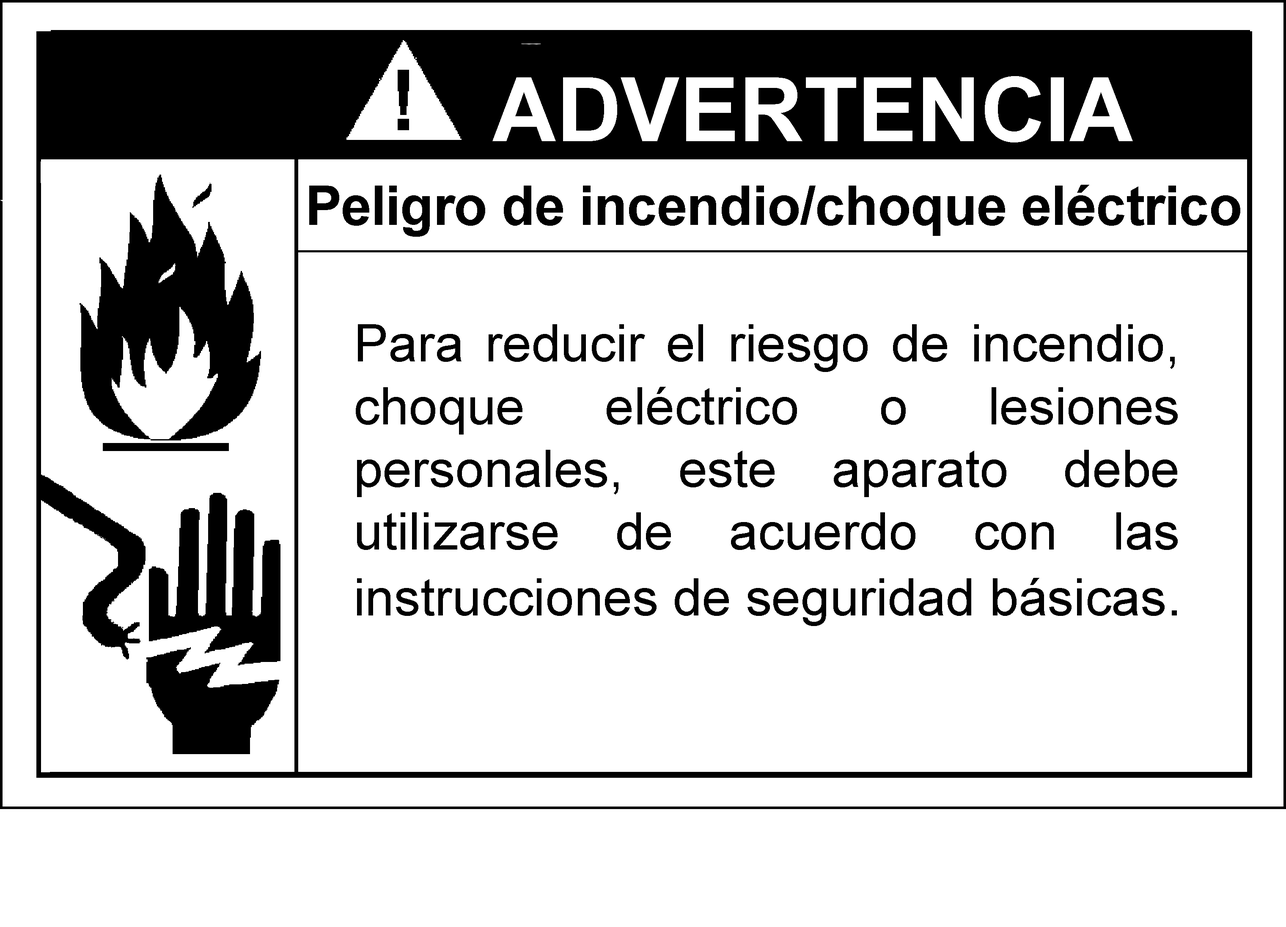
<style>
.page{position:relative;width:1286px;height:927px;background:#ffffff}
.page>*{position:absolute;margin:0}
.t1{font:88.8px "Arial-BoldMT";color:#ffffff}
.t2{font:54.8px "Arial-BoldMT";letter-spacing:-0.01em;color:#010101}
.t3{font:52.2px "ArialMT";color:#010101}
.t4{font:54.8px "ArialMT";color:#010101}
</style>
<div class="page">
<p class="t1" style="left:492px;top:76px;width:641px;height:67px">ADVERTENCIA</p>
<p class="t2" style="left:309px;top:185px;width:931px;height:52px">Peligro de incendio/choque eléctrico</p>
<p class="t3" style="left:356px;top:324px;width:821px;height:302px;text-align:justify">Para reducir el riesgo de incendio, choque eléctrico o lesiones personales, este aparato debe utilizarse de acuerdo con las instrucciones de seguridad básicas<span class="t4">.</span></p>
</div>
